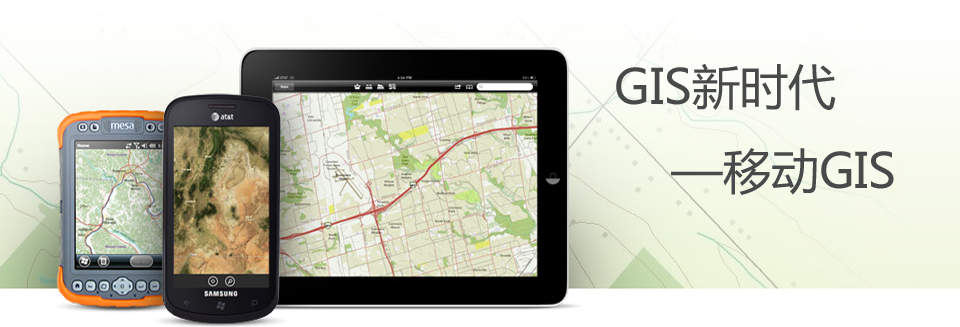
<style>
.page{position:relative;width:960px;height:327px}
.page>*{position:absolute;margin:0}
.t1{font:48px "MicrosoftYaHei";color:#484a49}
</style>
<div class="page">
<p class="t1" style="left:616px;top:63px;width:278px;height:132px">GIS新时代<br>    —移动GIS</p>
</div>
